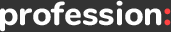
<style>
.page{position:relative;width:171px;height:32px;background:#333333}
.page>*{position:absolute;margin:0}
.t1{font:33.3px "Nunito-ExtraBold";color:#fefefe}
.t2{font:33.3px "Nunito-ExtraBold";color:#ff4242}
</style>
<div class="page">
<p class="t1" style="left:0px;top:0px;width:171px;height:32px">profession<span class="t2">:</span></p>
</div>
